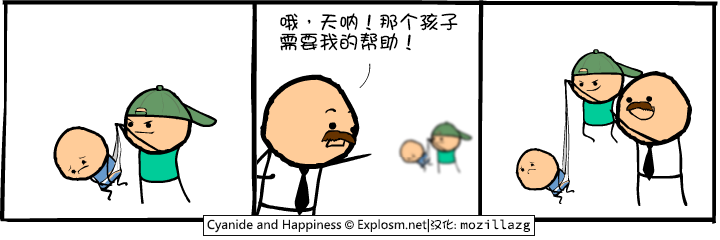
<style>
.page{position:relative;width:720px;height:240px;background:#ffffff}
.page>*{position:absolute;margin:0}
.t1{font:20px/20px "DFGirl";color:#000000}
</style>
<div class="page">
<p class="t1" style="left:280px;top:13px;width:178px;height:38px">哦，天呐！那个孩子<br>需要我的帮助！</p>
</div>
